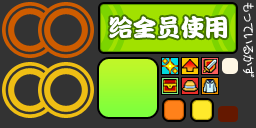
<style>
.page{position:relative;width:256px;height:128px;background:#333333}
.page>*{position:absolute;margin:0}
.t1{font:24px "DFPKanTingLiuW9";color:#ffffff}
</style>
<div class="page">
<p class="t1" style="left:109px;top:16px;width:118px;height:23px">给全员使用</p>
</div>
